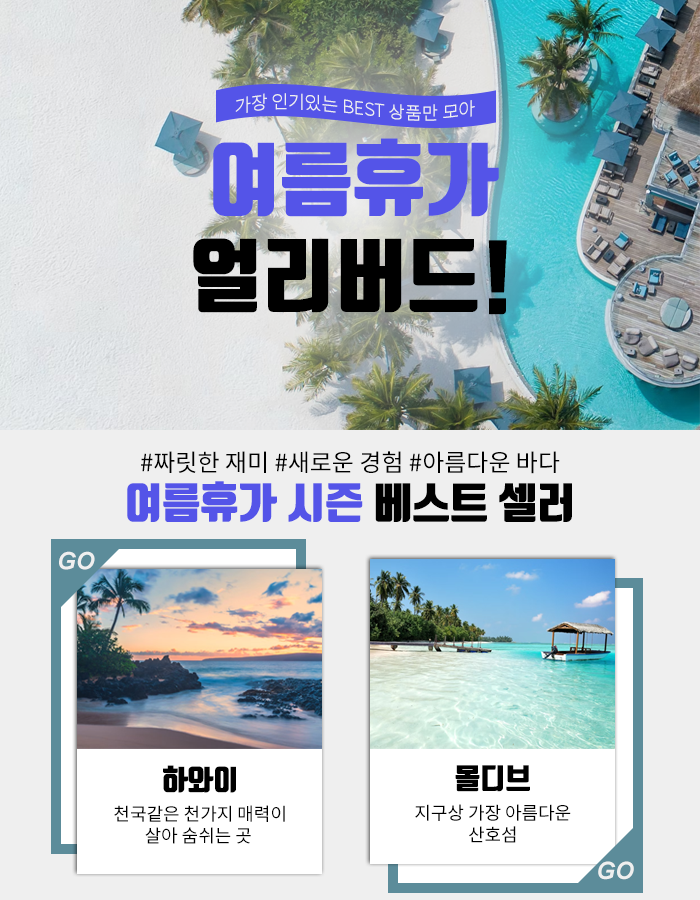
<style>
.page{position:relative;width:700px;height:900px}
.page>*{position:absolute;margin:0}
.t1{font:18px "SpoqaHanSans-Light";color:#efefef}
.t2{font:80px "TmonMonsoriBlack";color:#000000}
.t3{font:80px "TmonMonsoriBlack";color:#5454e8}
.t4{font:24px "SpoqaHanSans-Regular";color:#000000}
.t5{font:42px "TmonMonsoriBlack";color:#5454e8}
.t6{font:42px "TmonMonsoriBlack";color:#000000}
.t7{font:24px "Arial-BoldItalicMT";color:#efefef}
.t8{font:28px "TmonMonsoriBlack";color:#000000}
.t9{font:28.1px "TmonMonsoriBlack";color:#000000}
.t10{font:18px "SpoqaHanSans-Regular";color:#000000}
.t11{font:18.1px "SpoqaHanSans-Regular";color:#000000}
</style>
<div class="page">
<p class="t1" style="left:235px;top:93px;width:240px;height:28px">가장 인기있는 BEST 상품만 모아</p>
<p class="t2" style="left:193px;top:138px;width:314px;height:177px;text-align:center"><span class="t3">여름휴가<br></span>얼리버드!</p>
<p class="t4" style="left:141px;top:451px;width:419px;height:23px">#짜릿한 재미 #새로운 경험 #아름다운 바다</p>
<p class="t5" style="left:127px;top:481px;width:445px;height:41px">여름휴가 시즌<span class="t6"> 베스트 셀러</span></p>
<p class="t7" style="left:59px;top:551px;width:36px;height:19px">GO</p>
<p class="t8" style="left:163px;top:765px;width:73px;height:28px">하와이</p>
<p class="t9" style="left:455px;top:765px;width:75px;height:27px">몰디브</p>
<p class="t10" style="left:114px;top:805px;width:171px;height:39px;text-align:center">천국같은 천가지 매력이<br>살아 숨쉬는 곳</p>
<p class="t11" style="left:415px;top:804px;width:156px;height:39px;text-align:center">지구상 가장 아름다운<br>산호섬</p>
<p class="t7" style="left:598px;top:861px;width:36px;height:19px">GO</p>
</div>
